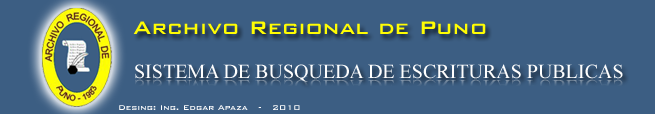
<style>
.page{position:relative;width:655px;height:114px;background:#3c5e83}
.page>*{position:absolute;margin:0}
.t1{font:24px "BankGothicBT-Medium";color:#fffd03}
.t2{font:20px "TimesNewRomanPSMT";color:#fefefe}
.t3{font:9.2px "BankGothicBT-Medium";color:#fefefe}
</style>
<div class="page">
<p class="t1" style="left:133px;top:21px;width:353px;height:13px">Archivo Regional de Puno</p>
<p class="t2" style="left:135px;top:64px;width:488px;height:18px">SISTEMA DE BUSQUEDA DE ESCRITURAS PUBLICAS</p>
<p class="t3" style="left:119px;top:105px;width:181px;height:5px">Desing: Ing. Edgar Apaza   -   2010</p>
</div>
